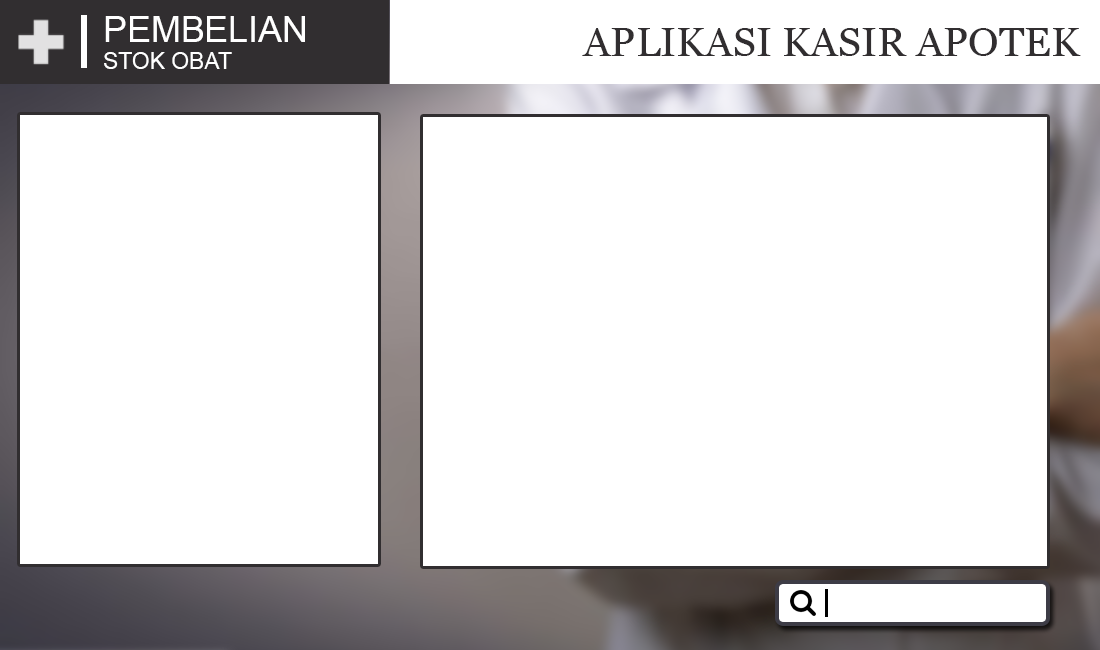
<style>
.page{position:relative;width:1100px;height:650px;background:#ffffff}
.page>*{position:absolute;margin:0}
.t1{font:36px "ArialMT";color:#ffffff}
.t2{font:23px "ArialMT";color:#ffffff}
.t3{font:40px "Georgia";color:#312e30}
</style>
<div class="page">
<p class="t1" style="left:104px;top:16px;width:201px;height:53px">PEMBELIAN<br><span class="t2">STOK OBAT</span></p>
<p class="t3" style="left:582px;top:28px;width:499px;height:28px">APLIKASI KASIR APOTEK</p>
</div>
